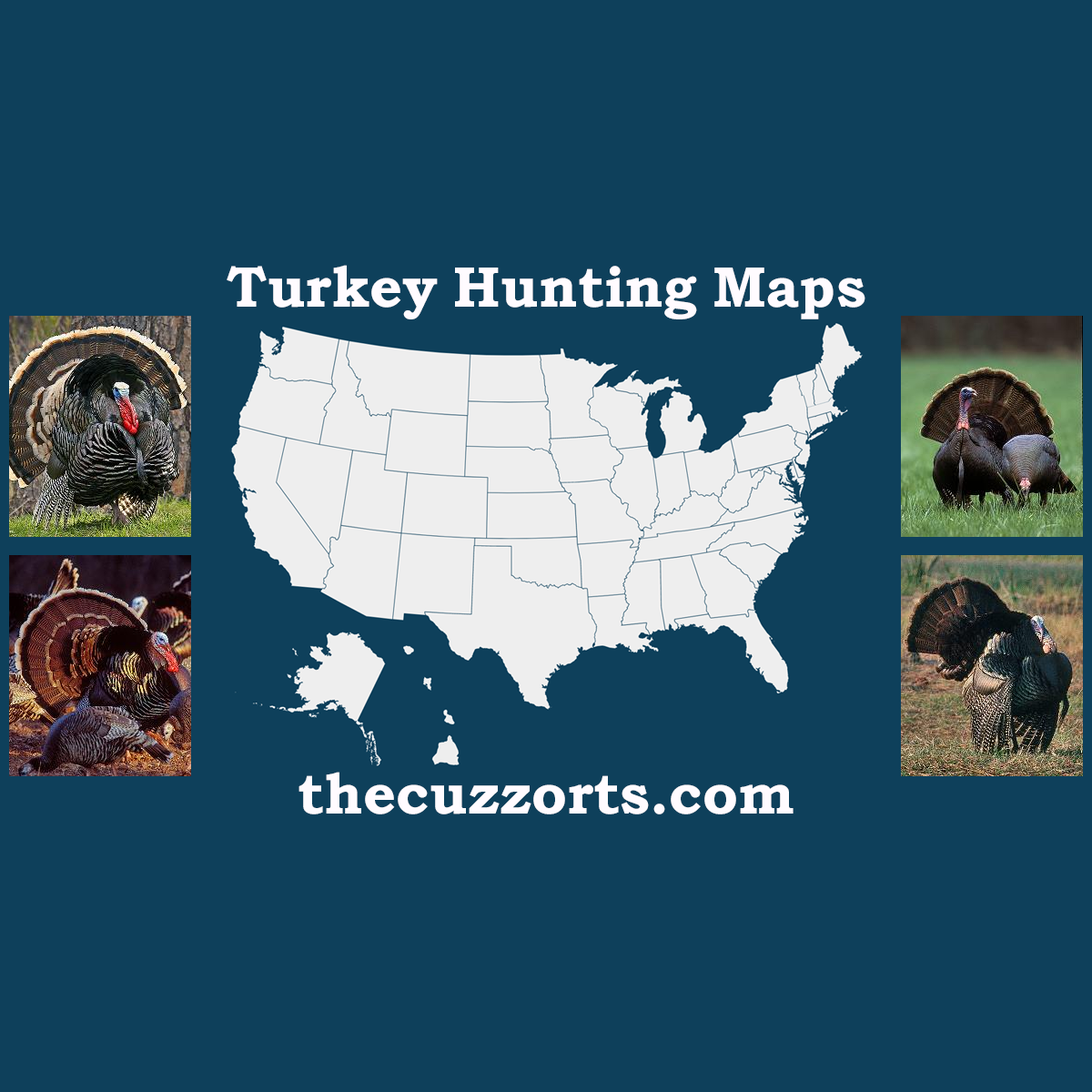
<style>
.page{position:relative;width:1092px;height:1092px;background:#0e405b}
.page>*{position:absolute;margin:0}
.t1{font:57.3px "BookmanOldStyle-Bold";color:#fffbff}
</style>
<div class="page">
<p class="t1" style="left:227px;top:265px;width:638px;height:54px">Turkey Hunting Maps</p>
<p class="t1" style="left:298px;top:772px;width:496px;height:42px">thecuzzorts.com</p>
</div>
